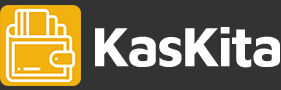
<style>
.page{position:relative;width:281px;height:90px;background:#333333}
.page>*{position:absolute;margin:0}
.t1{font:56.8px "MavenPro-Bold";letter-spacing:-0.05em;color:#ffffff}
</style>
<div class="page">
<p class="t1" style="left:95px;top:27px;width:185px;height:41px">KasKita</p>
</div>
